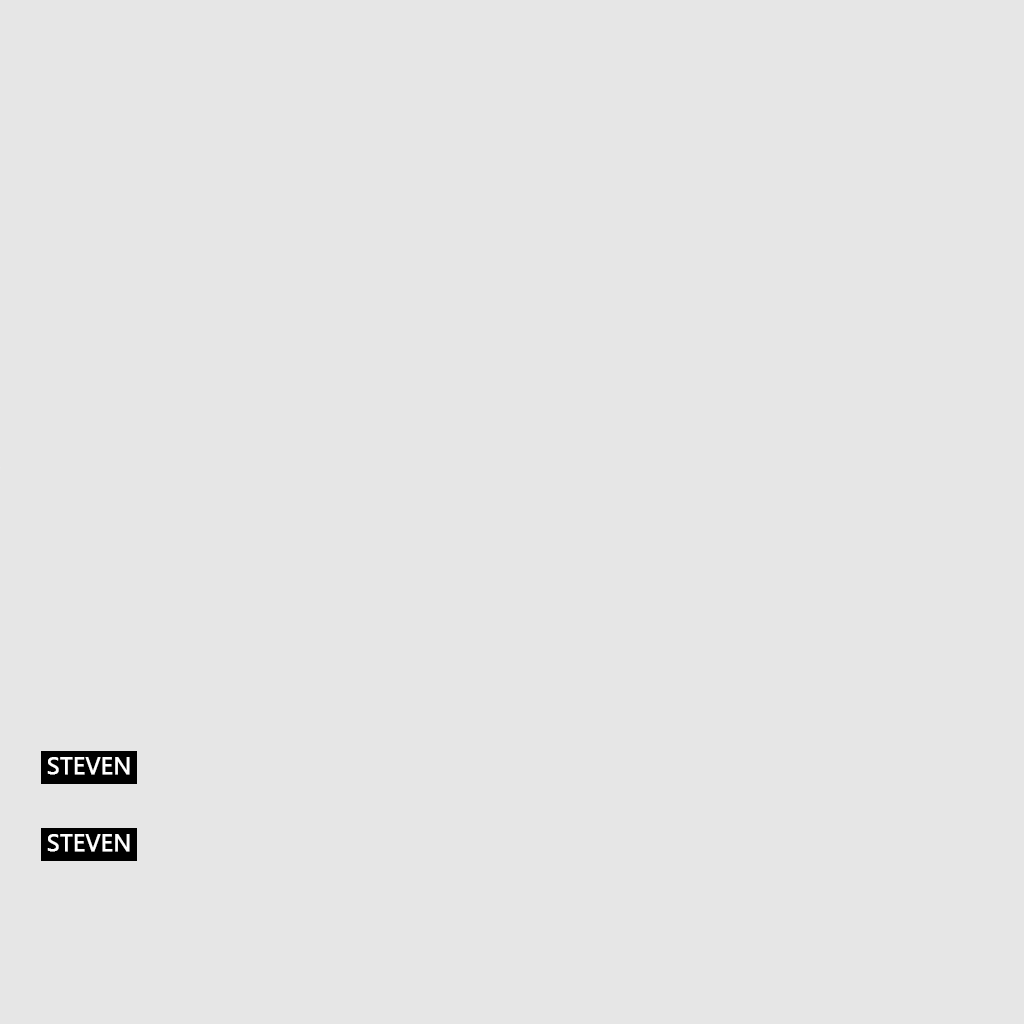
<style>
.page{position:relative;width:1024px;height:1024px;background:#e6e6e6}
.page>*{position:absolute;margin:0}
.t1{font:23.7px "Ebrima";letter-spacing:-0.005em;color:#ffffff;font-weight:bold}
</style>
<div class="page">
<p class="t1" style="left:47px;top:757px;width:83px;height:18px">STEVEN</p>
<p class="t1" style="left:47px;top:834px;width:83px;height:18px">STEVEN</p>
</div>
